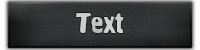
<style>
.page{position:relative;width:200px;height:50px}
.page>*{position:absolute;margin:0}
.t1{font:29.2px "Graffiti1CTT-Regular";color:#cdcdcd}
</style>
<div class="page">
<p class="t1" style="left:76px;top:12px;width:48px;height:21px">Text</p>
</div>
